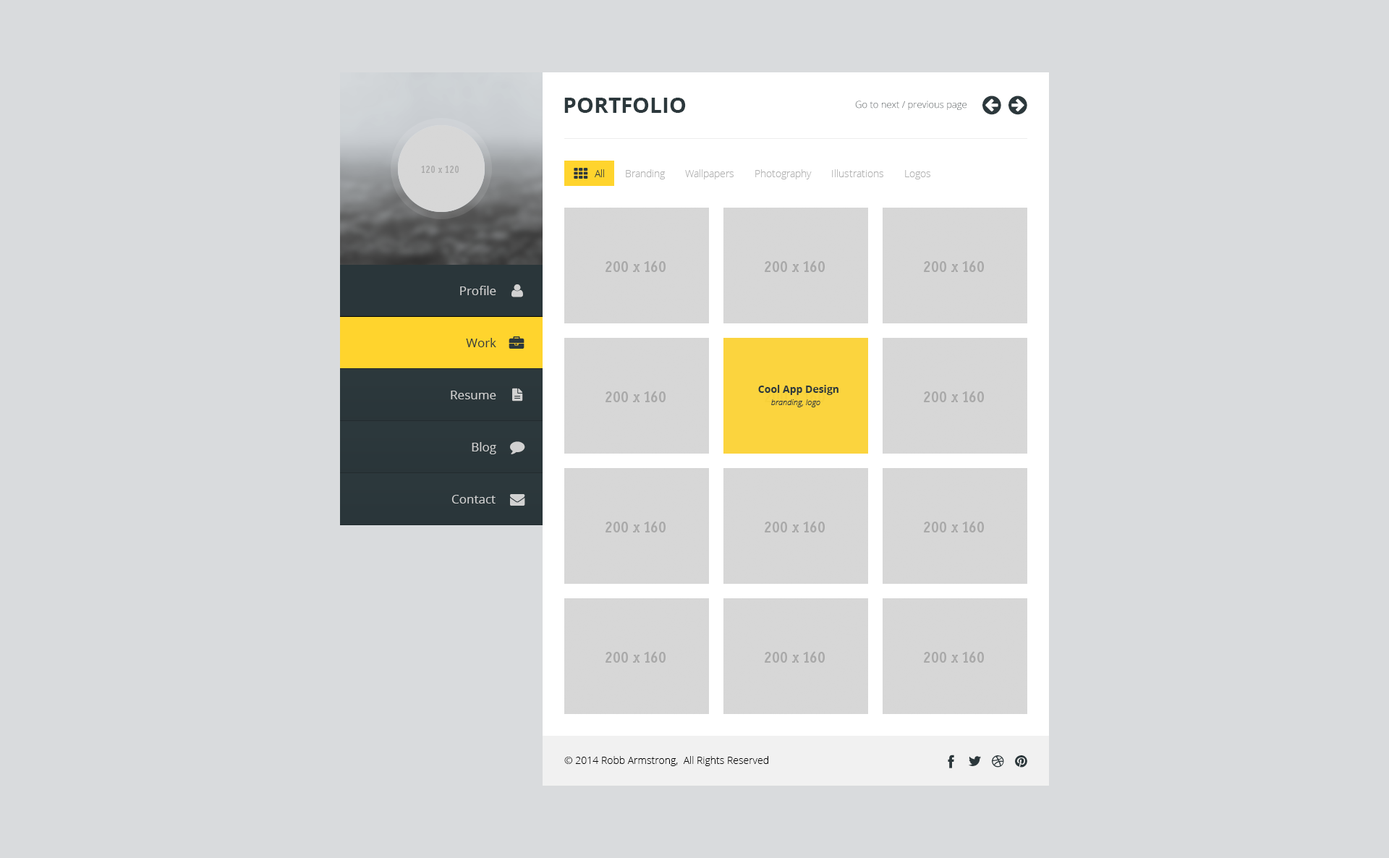
<style>
.page{position:relative;width:1389px;height:858px;background:#d9dbdd}
.page>*{position:absolute;margin:0}
.t1{font:21.7px "OpenSans-Bold";color:#2c383c;text-transform:uppercase}
.t2{font:9.4px "OpenSans-Light"}
.t3{font:10.1px "OpenSans-Light";color:#b1b1b1}
.t4{font:10.1px "OpenSans-Light";color:#2c383c}
.t5{font:12.3px "OpenSans";color:#d1d1d1}
.t6{font:12.3px "OpenSans";color:#2c383c}
.t7{font:10.1px "OpenSans-Bold";color:#2c383c}
.t8{font:8px "OpenSansLight-Italic";color:#2c383c}
.t9{font:10.1px "OpenSans-Light";color:#000000}
</style>
<div class="page">
<p class="t1" style="left:564px;top:98px;width:122px;height:15px">Portfolio</p>
<p class="t2" style="left:855px;top:101px;width:112px;height:9px">Go to next / previous page</p>
<p class="t3" style="left:595px;top:169px;width:336px;height:10px"><span class="t4">All       </span>Branding       Wallpapers       Photography       Illustrations       Logos</p>
<p class="t5" style="left:460px;top:286px;width:36px;height:9px">Profile</p>
<p class="t6" style="left:466px;top:338px;width:30px;height:9px">Work</p>
<p class="t7" style="left:758px;top:385px;width:81px;height:10px">Cool App Design</p>
<p class="t5" style="left:451px;top:391px;width:45px;height:8px">Resume</p>
<p class="t8" style="left:771px;top:399px;width:50px;height:8px">branding, logo</p>
<p class="t5" style="left:472px;top:442px;width:24px;height:12px">Blog</p>
<p class="t5" style="left:452px;top:495px;width:44px;height:9px">Contact</p>
<p class="t9" style="left:564px;top:756px;width:205px;height:10px">© 2014 Robb Armstrong,  All Rights Reserved</p>
</div>
